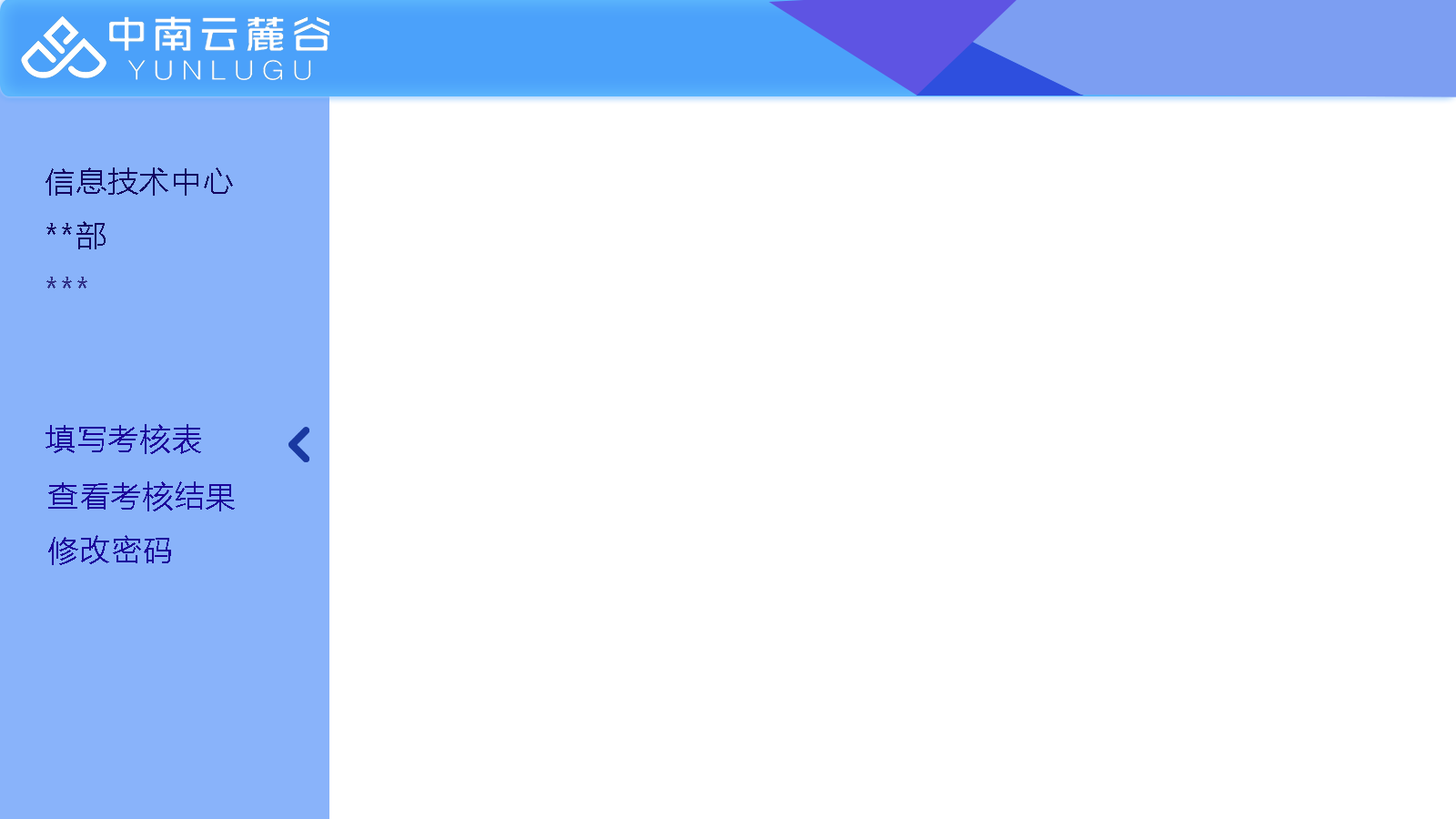
<style>
.page{position:relative;width:1456px;height:819px;background:#ffffff}
.page>*{position:absolute;margin:0}
.t1{font:30.3px "MicrosoftYaHei";letter-spacing:0.05em;color:#130461}
.t2{font:30.3px "MicrosoftYaHei";letter-spacing:0.05em;color:#303087}
.t3{font:30.3px "MicrosoftYaHei";letter-spacing:0.05em;color:#1c039a}
</style>
<div class="page">
<p class="t1" style="left:45px;top:167px;width:188px;height:29px">信息技术中心</p>
<p class="t1" style="left:46px;top:221px;width:60px;height:28px">**部</p>
<p class="t2" style="left:46px;top:277px;width:41px;height:11px">***</p>
<p class="t3" style="left:45px;top:424px;width:156px;height:30px">填写考核表</p>
<p class="t3" style="left:48px;top:481px;width:187px;height:30px">查看考核结果</p>
<p class="t3" style="left:48px;top:535px;width:123px;height:30px">修改密码</p>
</div>
